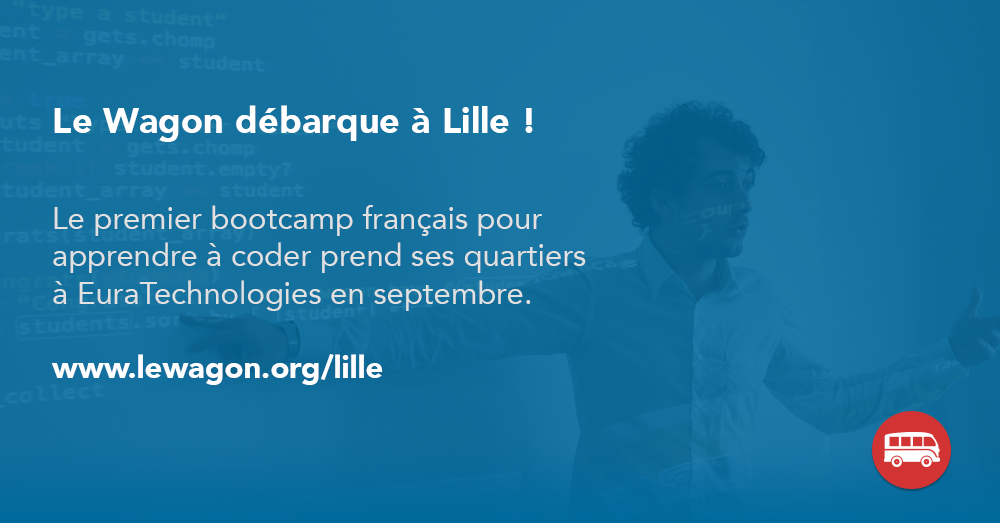
<style>
.page{position:relative;width:1000px;height:523px}
.page>*{position:absolute;margin:0}
.t1{font:31px "Avenir-Roman";color:#e1e1e1}
.t2{font:36.4px "Avenir-Black";color:#ffffff}
.t3{font:31px "Avenir-Black";color:#ffffff}
</style>
<div class="page">
<p class="t1" style="left:51px;top:105px;width:535px;height:280px"><span class="t2">Le Wagon débarque à Lille !<br><br></span>Le premier bootcamp français pour <br>apprendre à coder prend ses quartiers<br>à EuraTechnologies en septembre.<br><br><span class="t3">www.lewagon.org/lille</span></p>
</div>
